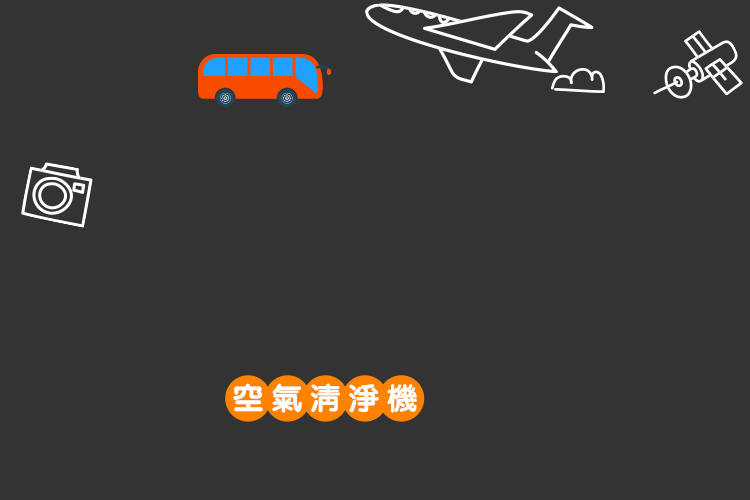
<style>
.page{position:relative;width:750px;height:500px;background:#333333}
.page>*{position:absolute;margin:0}
.t1{font:29.4px "DFYuan-XB-WIN-BF";letter-spacing:0.26em;color:#ffffff;scale:1.04 1}
</style>
<div class="page">
<p class="t1" style="left:233px;top:383px;width:184px;height:30px">空氣清淨機</p>
</div>
